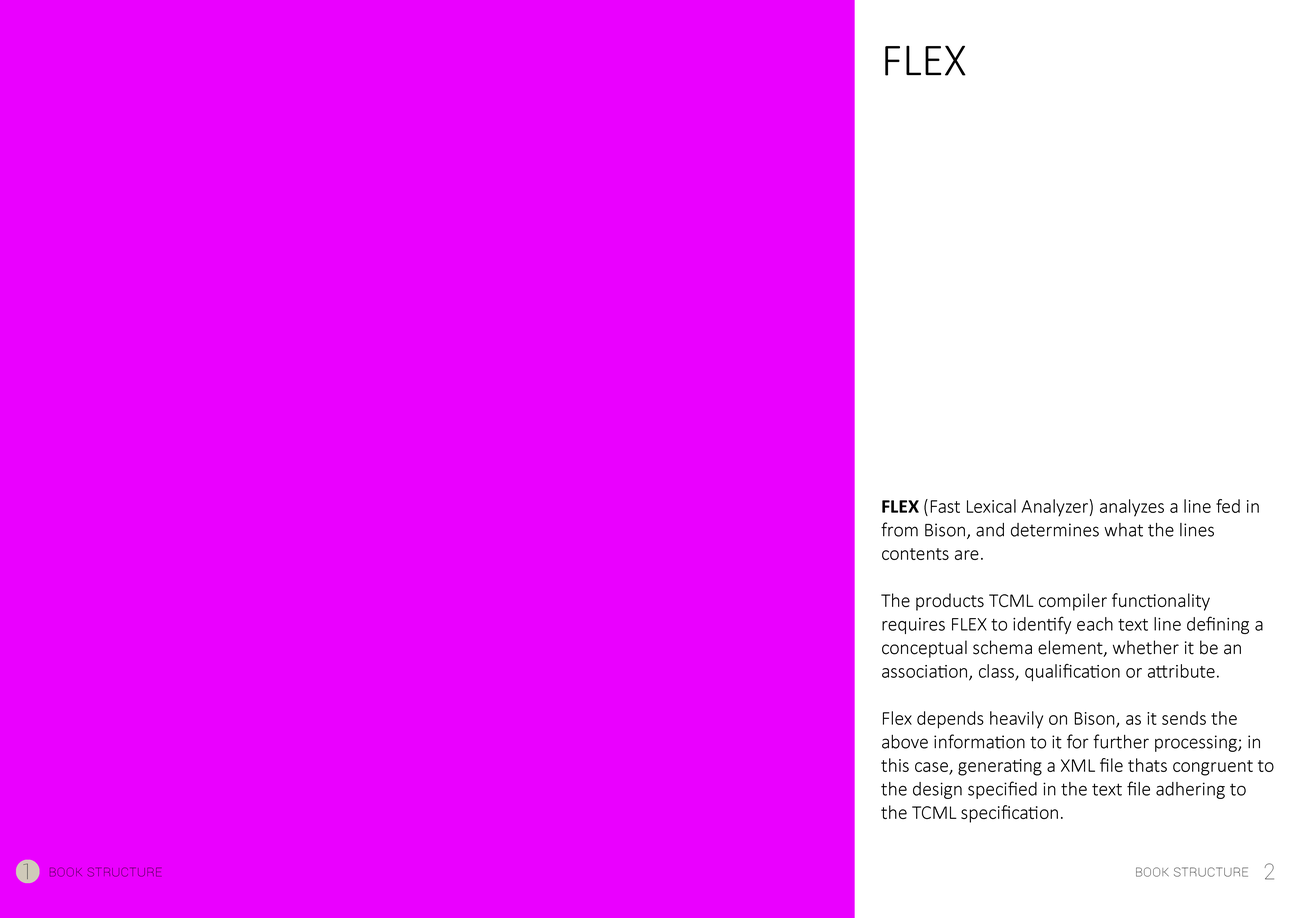
<style>
.page{position:relative;width:1299px;height:918px;background:#ea00ff}
.page>*{position:absolute;margin:0}
.t1{font:45.8px "Calibri-Light";color:#000000;text-transform:uppercase}
.t2{font:19.6px "Calibri-Light";color:#000000}
.t3{font:19.6px "Calibri-Bold";color:#000000}
.t4{font:21.8px "Roboto-Thin";color:#484848}
.t5{font:15.3px "Roboto-Thin";color:#000000;font-variant:small-caps}
</style>
<div class="page">
<p class="t1" style="left:885px;top:46px;width:80px;height:29px">flex</p>
<p class="t2" style="left:881px;top:499px;width:392px;height:324px"><span class="t3">FLEX </span>(Fast Lexical Analyzer) analyzes a line fed in from Bison, and determines what the lines contents are.<br><br>The products TCML compiler functionality requires FLEX to identify each text line defining a conceptual schema element, whether it be an association, class, qualification or attribute.<br><br>Flex depends heavily on Bison, as it sends the above information to it for further processing; in this case, generating a XML file thats congruent to the design specified in the text file adhering to the TCML specification.</p>
<p class="t4" style="left:23px;top:864px;width:5px;height:16px">1</p>
<p class="t5" style="left:50px;top:868px;width:112px;height:9px">Book structure</p>
<p class="t5" style="left:1136px;top:868px;width:112px;height:9px">Book structure</p>
<p class="t4" style="left:1264px;top:864px;width:10px;height:16px">2</p>
</div>
